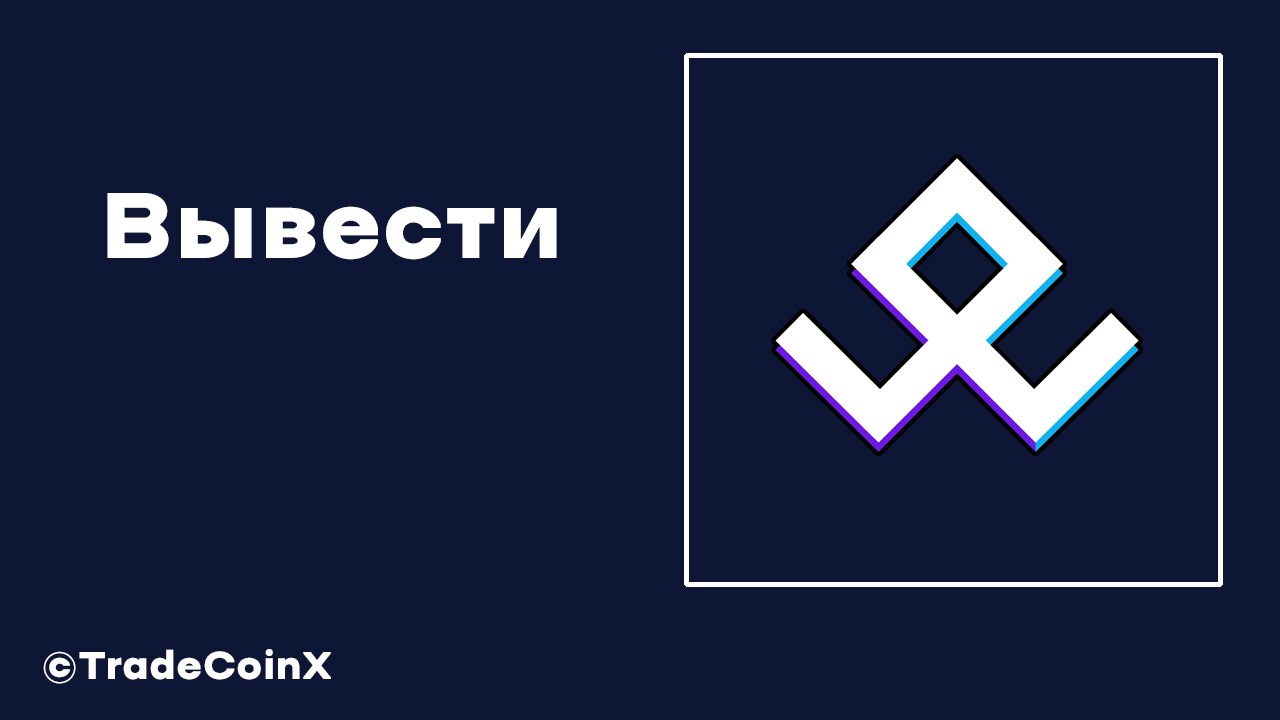
<style>
.page{position:relative;width:1280px;height:720px;background:#0d1635}
.page>*{position:absolute;margin:0}
.t1{font:100px "Ermilov-Bold";color:#ffffff}
.t2{font:41.7px "Ermilov-Bold";color:#ffffff}
</style>
<div class="page">
<p class="t1" style="left:107px;top:193px;width:450px;height:67px">Вывести</p>
<p class="t2" style="left:43px;top:649px;width:288px;height:35px">©TradeCoinX</p>
</div>
